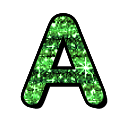
<style>
.page{position:relative;width:128px;height:128px;background:#ffffff}
.page>*{position:absolute;margin:0}
.t1{font:119.4px "ArialRoundedMTBold";letter-spacing:0.02em}
</style>
<div class="page">
<p class="t1" style="left:23px;top:16px;width:81px;height:89px">A</p>
</div>
